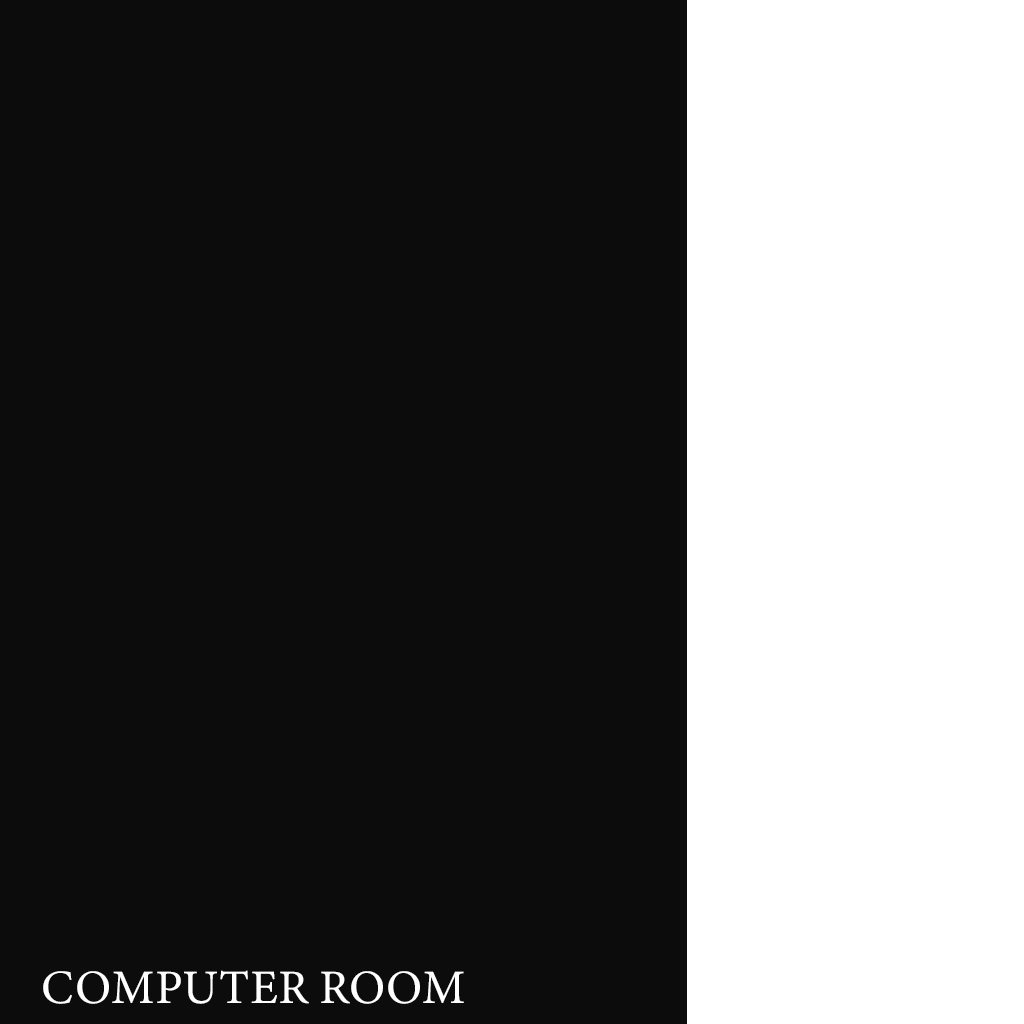
<style>
.page{position:relative;width:1024px;height:1024px;background:#0c0c0c}
.page>*{position:absolute;margin:0}
.t1{font:48px "MinionVariableConcept-Roman";color:#ffffff}
</style>
<div class="page">
<p class="t1" style="left:43px;top:970px;width:421px;height:34px">COMPUTER ROOM</p>
</div>
